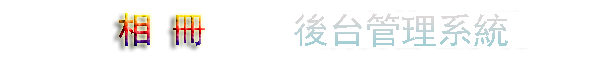
<style>
.page{position:relative;width:600px;height:60px;background:#ffffff}
.page>*{position:absolute;margin:0}
.t1{font:36px "SimHei"}
</style>
<div class="page">
<p class="t1" style="left:119px;top:13px;width:86px;height:33px">相 冊</p>
<p class="t1" style="left:294px;top:13px;width:214px;height:34px">後台管理系統</p>
</div>
